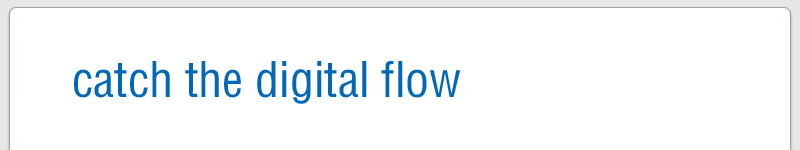
<style>
.page{position:relative;width:800px;height:150px;background:#ffffff}
.page>*{position:absolute;margin:0}
.t1{font:48px "FZYTK--GBK1-0";color:#0068b7}
</style>
<div class="page">
<p class="t1" style="left:74px;top:61px;width:387px;height:43px">catch the digital flow</p>
</div>
